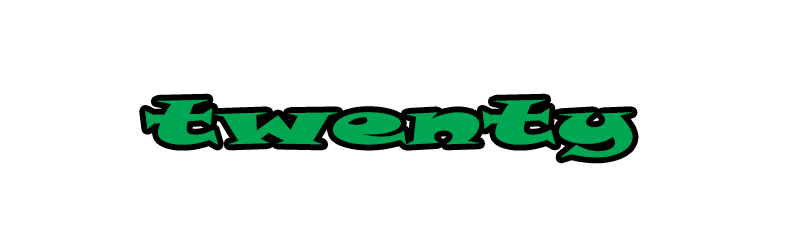
<style>
.page{position:relative;width:812px;height:249px;background:#ffffff}
.page>*{position:absolute;margin:0}
.t1{font:60px "SnapITC-Regular";color:#00a651;scale:2 1}
</style>
<div class="page">
<p class="t1" style="left:145px;top:99px;width:488px;height:59px">twenty</p>
</div>
